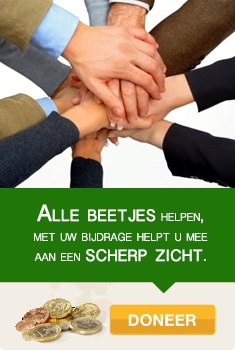
<style>
.page{position:relative;width:235px;height:350px;background:#207606}
.page>*{position:absolute;margin:0}
.t1{font:16px/5px "GujaratiSangamMN";color:#f9f9f9;font-variant:small-caps}
.t2{font:23px/5px "GujaratiSangamMN";color:#f9f9f9;font-variant:small-caps;font-weight:bold}
</style>
<div class="page">
<p class="t1" style="left:34px;top:204px;width:174px;height:58px;text-align:center"><span class="t2">Alle beetjes</span> helpen,<br><br>met uw bijdrage helpt u mee<br><br>aan een <span class="t2">scherp zicht</span>.</p>
</div>
